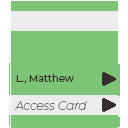
<style>
.page{position:relative;width:128px;height:128px;background:#7cc576}
.page>*{position:absolute;margin:0}
.t1{font:10px "Montserrat-Regular";color:#362f2d}
.t2{font:12px "Montserrat-ThinItalic";color:#362f2d}
</style>
<div class="page">
<p class="t1" style="left:16px;top:74px;width:58px;height:10px">L., Matthew</p>
<p class="t2" style="left:14px;top:101px;width:73px;height:9px">Access Card</p>
</div>
